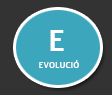
<style>
.page{position:relative;width:112px;height:95px;background:#3ca6bc}
.page>*{position:absolute;margin:0}
.t1{font:30px "Alef-Bold";color:#ffffff}
.t2{font:8px "Alef-Bold";color:#ffffff}
</style>
<div class="page">
<p class="t1" style="left:50px;top:30px;width:14px;height:21px">E</p>
<p class="t2" style="left:39px;top:60px;width:40px;height:8px">EVOLUCIÓ</p>
</div>
